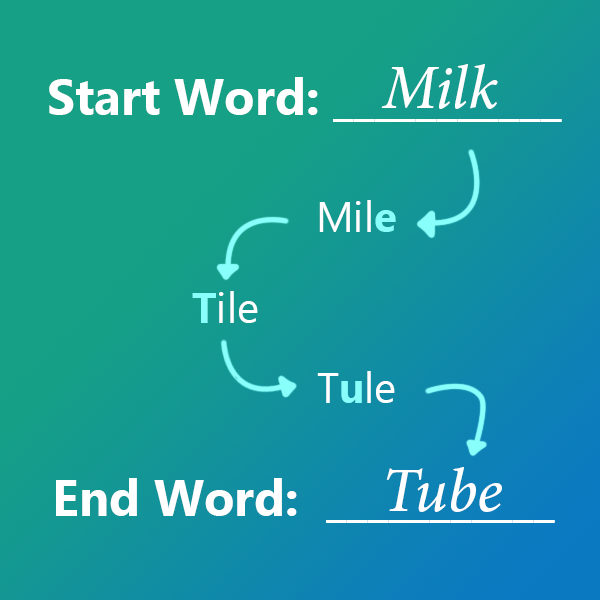
<style>
.page{position:relative;width:600px;height:600px;background:#16a085}
.page>*{position:absolute;margin:0}
.t1{font:62.5px "MinionPro-MediumIt";color:#ffffff}
.t2{font:12px "MicrosoftNewTaiLue-Bold";color:#ffffff}
.t3{font:41.7px "MicrosoftTaiLe";color:#ffffff}
.t4{font:41.7px "MicrosoftTaiLe-Bold";color:#88fffb}
</style>
<div class="page">
<p class="t1" style="left:381px;top:64px;width:117px;height:45px">Milk</p>
<p class="t2" style="left:49px;top:77px;width:513px;height:45px">Start Word: ___________</p>
<p class="t3" style="left:319px;top:200px;width:77px;height:32px">Mil<span class="t4">e</span></p>
<p class="t3" style="left:192px;top:291px;width:66px;height:32px"><span class="t4">T</span>ile</p>
<p class="t3" style="left:317px;top:371px;width:78px;height:32px">T<span class="t4">u</span>le</p>
<p class="t1" style="left:386px;top:467px;width:116px;height:45px">Tube</p>
<p class="t2" style="left:56px;top:478px;width:499px;height:45px">End Word:  ___________</p>
</div>
